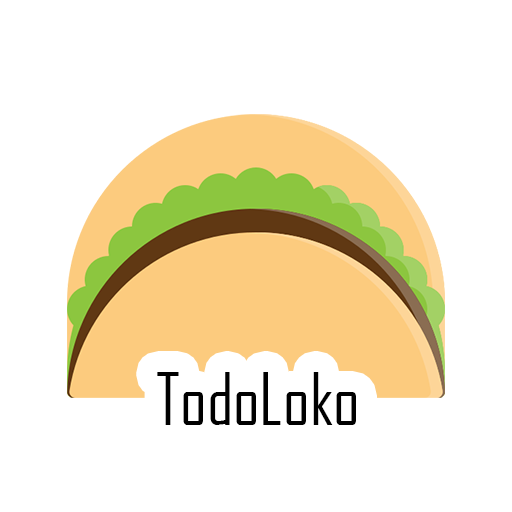
<style>
.page{position:relative;width:512px;height:512px;background:#ffffff}
.page>*{position:absolute;margin:0}
.t1{font:70px "AgencyFB-Reg";color:#000000}
</style>
<div class="page">
<p class="t1" style="left:157px;top:372px;width:199px;height:53px">TodoLoko</p>
</div>
